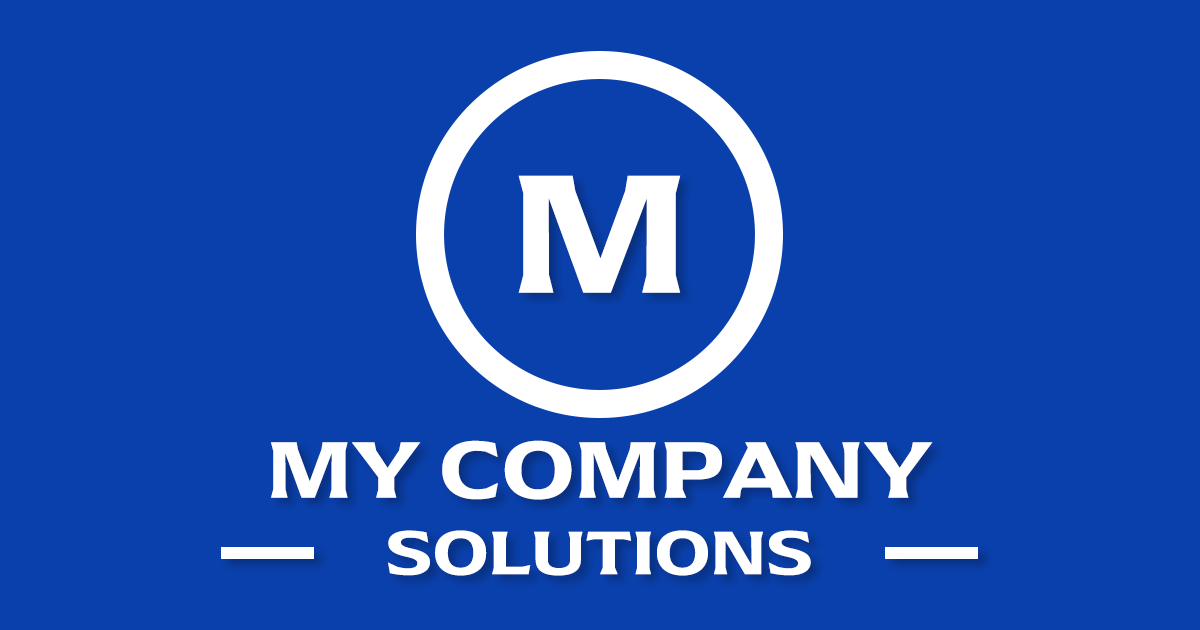
<style>
.page{position:relative;width:1200px;height:630px;background:#0a40ab}
.page>*{position:absolute;margin:0}
.t1{font:176px "Arpona-SemiBold";color:#ffffff;scale:1.17 1}
.t2{font:83.3px "Arpona-SemiBold";color:#ffffff;scale:1.17 1}
.t3{font:63.8px "Arpona-SemiBold";color:#ffffff;scale:1.17 1}
</style>
<div class="page">
<p class="t1" style="left:518px;top:175px;width:163px;height:118px">M</p>
<p class="t2" style="left:271px;top:440px;width:662px;height:60px">MY COMPANY</p>
<p class="t3" style="left:388px;top:530px;width:423px;height:46px">SOLUTIONS</p>
</div>
